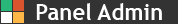
<style>
.page{position:relative;width:178px;height:24px;background:#333333}
.page>*{position:absolute;margin:0}
.t1{font:22.3px "TrebuchetMS-Bold";color:#ffffff}
</style>
<div class="page">
<p class="t1" style="left:36px;top:3px;width:126px;height:17px">Panel Admin</p>
</div>
